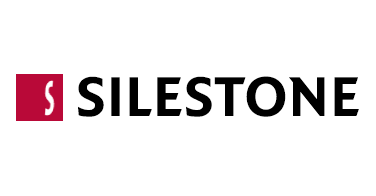
<style>
.page{position:relative;width:376px;height:196px;background:#ffffff}
.page>*{position:absolute;margin:0}
.t1{font:60px "QuadraatSans-Bold";letter-spacing:0.02em;color:#000000}
</style>
<div class="page">
<p class="t1" style="left:78px;top:76px;width:281px;height:41px">SILESTONE</p>
</div>
